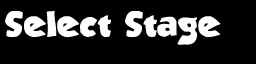
<style>
.page{position:relative;width:256px;height:64px;background:#000000}
.page>*{position:absolute;margin:0}
.t1{font:27px "StrandedBRK";color:#ffffff}
</style>
<div class="page">
<p class="t1" style="left:5px;top:10px;width:216px;height:35px">Select Stage</p>
</div>
